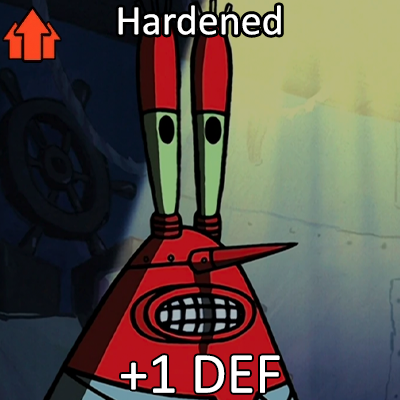
<style>
.page{position:relative;width:400px;height:400px}
.page>*{position:absolute;margin:0}
.t1{font:72px "Calibri";color:#ffffff}
.t2{font:100px "Calibri";color:#ffffff}
</style>
<div class="page">
<p class="t1" style="left:118px;top:5px;width:163px;height:30px">Hardened</p>
<p class="t2" style="left:121px;top:355px;width:159px;height:38px">+1 DEF</p>
</div>
